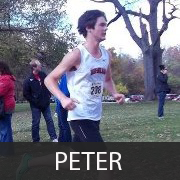
<style>
.page{position:relative;width:180px;height:180px}
.page>*{position:absolute;margin:0}
.t1{font:26.7px "MyriadPro-Regular";color:#faf7f7}
</style>
<div class="page">
<p class="t1" style="left:56px;top:152px;width:66px;height:18px">PETER</p>
</div>
